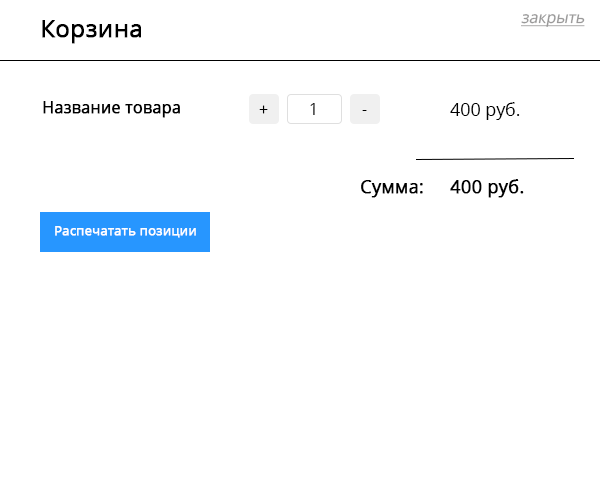
<style>
.page{position:relative;width:600px;height:500px;background:#ffffff}
.page>*{position:absolute;margin:0}
.t1{font:16px "OpenSans-Regular";letter-spacing:-0.005em;color:#9a9999;font-style:italic;text-decoration:underline}
.t2{font:24px "OpenSans-Regular";letter-spacing:-0.005em;color:#000000;font-weight:bold}
.t3{font:16px "OpenSans-Regular";letter-spacing:-0.005em;color:#000000;font-weight:bold}
.t4{font:18px "OpenSans-Regular";letter-spacing:-0.005em;color:#000000}
.t5{font:16px "OpenSans-Regular";letter-spacing:-0.005em;color:#000000}
.t6{font:16px "OpenSans-Regular";letter-spacing:-0.005em}
.t7{font:18px "OpenSans-Regular";letter-spacing:-0.005em;color:#000000;font-weight:bold}
.t8{font:13px "OpenSans-Regular";letter-spacing:-0.005em;color:#ffffff;font-weight:bold}
</style>
<div class="page">
<p class="t1" style="left:521px;top:14px;width:64px;height:13px">закрыть</p>
<p class="t2" style="left:42px;top:20px;width:99px;height:24px">Корзина</p>
<p class="t3" style="left:43px;top:101px;width:137px;height:17px">Название товара</p>
<p class="t4" style="left:450px;top:102px;width:70px;height:18px">400 руб.</p>
<p class="t5" style="left:259px;top:105px;width:9px;height:9px">+</p>
<p class="t6" style="left:310px;top:103px;width:5px;height:12px">1</p>
<p class="t5" style="left:362px;top:110px;width:5px;height:1px">-</p>
<p class="t7" style="left:361px;top:180px;width:62px;height:18px">Сумма:</p>
<p class="t7" style="left:450px;top:179px;width:74px;height:19px">400 руб.</p>
<p class="t8" style="left:55px;top:226px;width:141px;height:12px">Распечатать позиции</p>
</div>
